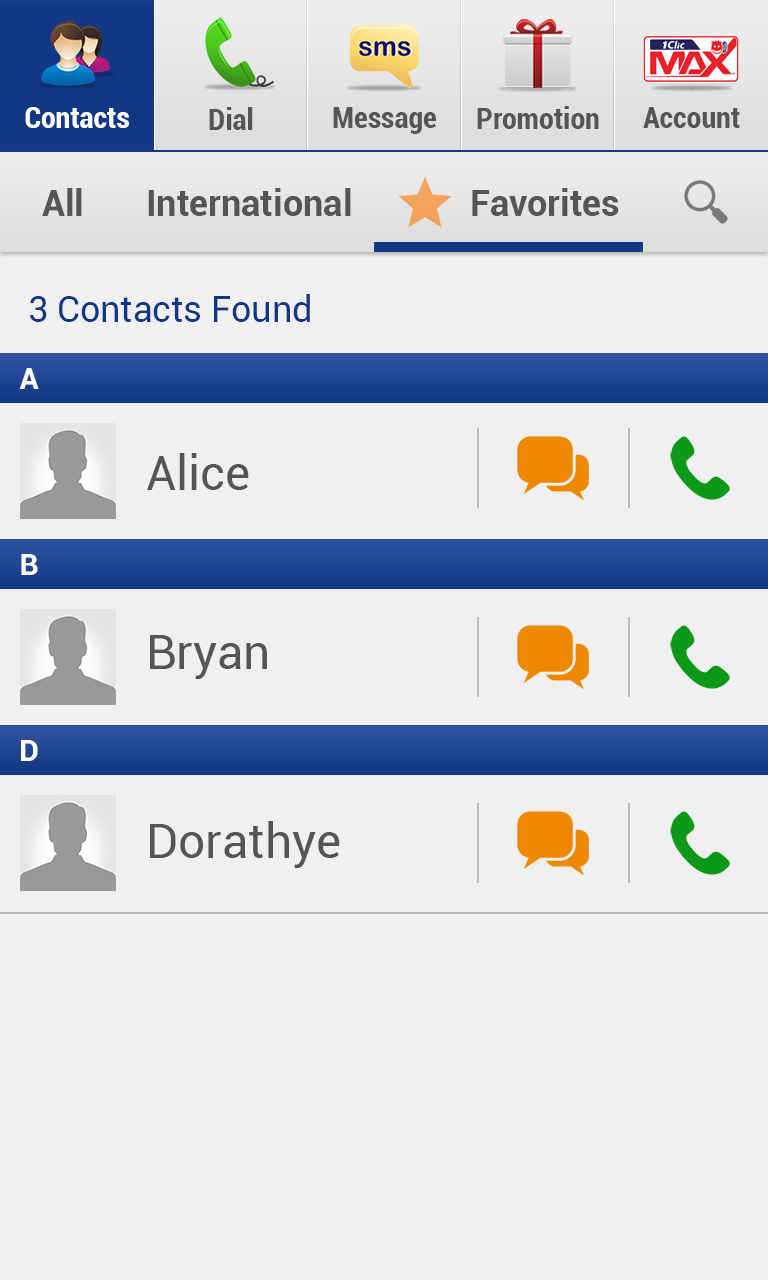
<style>
.page{position:relative;width:768px;height:1280px;background:#f0f0f0}
.page>*{position:absolute;margin:0}
.t1{font:30px "Roboto-BoldCondensed";color:#ffffff}
.t2{font:30px "Roboto-BoldCondensed";color:#555555}
.t3{font:36px "Roboto-Bold";color:#555555}
.t4{font:36px "Roboto-Regular";color:#123785}
.t5{font:30px "Roboto-Bold";color:#ffffff}
.t6{font:48px "Roboto-Regular";color:#555555}
</style>
<div class="page">
<p class="t1" style="left:25px;top:107px;width:104px;height:21px">Contacts</p>
<p class="t2" style="left:209px;top:107px;width:44px;height:23px">Dial</p>
<p class="t2" style="left:333px;top:107px;width:103px;height:27px">Message</p>
<p class="t2" style="left:477px;top:106px;width:122px;height:23px">Promotion</p>
<p class="t2" style="left:643px;top:107px;width:97px;height:21px">Account</p>
<p class="t3" style="left:42px;top:188px;width:40px;height:28px">All</p>
<p class="t3" style="left:148px;top:188px;width:203px;height:28px">International</p>
<p class="t3" style="left:472px;top:188px;width:147px;height:28px">Favorites</p>
<p class="t4" style="left:30px;top:294px;width:280px;height:28px">3 Contacts Found</p>
<p class="t5" style="left:19px;top:368px;width:20px;height:21px">A</p>
<p class="t6" style="left:147px;top:453px;width:102px;height:37px">Alice</p>
<p class="t5" style="left:21px;top:554px;width:17px;height:21px">B</p>
<p class="t6" style="left:150px;top:635px;width:117px;height:44px">Bryan</p>
<p class="t5" style="left:21px;top:740px;width:17px;height:21px">D</p>
<p class="t6" style="left:150px;top:821px;width:190px;height:47px">Dorathye</p>
</div>
